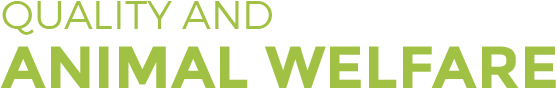
<style>
.page{position:relative;width:557px;height:88px;background:#ffffff}
.page>*{position:absolute;margin:0}
.t1{font:59.5px/59.5px "Montserrat-Bold";color:#a1c144}
.t2{font:39.7px/59.5px "Montserrat-Light";color:#a1c144}
</style>
<div class="page">
<p class="t1" style="left:0px;top:1px;width:556px;height:87px"><span class="t2">QUALITY AND<br></span>ANIMAL WELFARE</p>
</div>
